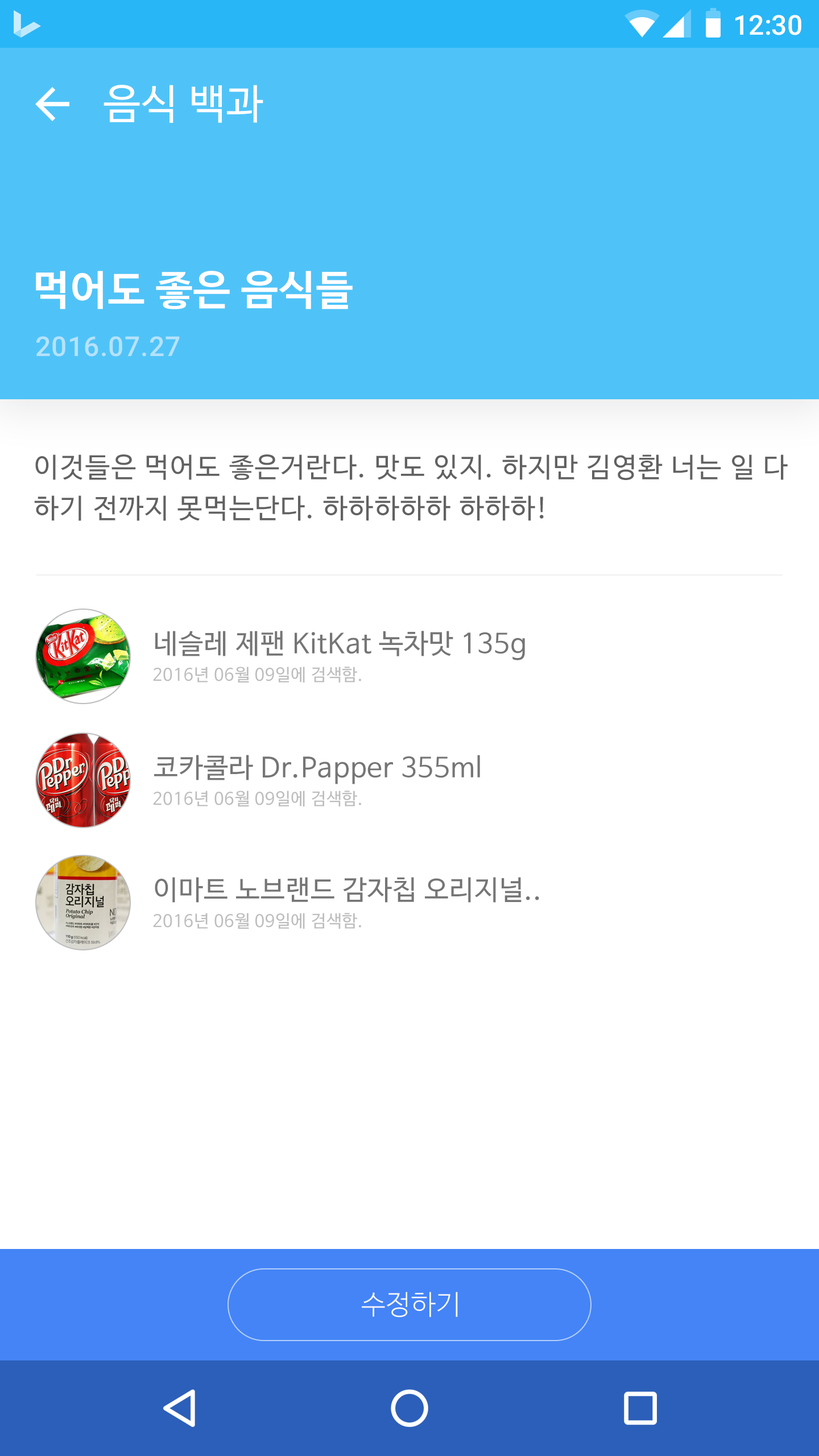
<style>
.page{position:relative;width:819px;height:1456px;background:#ffffff}
.page>*{position:absolute;margin:0}
.t1{font:27.3px "Roboto-Medium";color:#ffffff}
.t2{font:40.9px "NanumBarunGothic";letter-spacing:0.025em;color:#ffffff}
.t3{font:40.9px "NanumBarunGothicBold";letter-spacing:0.025em;color:#ffffff}
.t4{font:27.3px "Roboto-Medium";letter-spacing:0.025em;color:#b5e2fb}
.t5{font:27.3px/40.9px "NanumBarunGothic";letter-spacing:0.05em;color:#616161}
.t6{font:27.3px "NanumBarunGothic";letter-spacing:0.025em;color:#757575}
.t7{font:17.1px "NanumBarunGothic";letter-spacing:0.025em;color:#bdbdbd}
.t8{font:27.3px "NanumBarunGothicLight";letter-spacing:0.025em;color:#fafafa}
</style>
<div class="page">
<p class="t1" style="left:735px;top:15px;width:66px;height:20px">12:30</p>
<p class="t2" style="left:104px;top:85px;width:159px;height:38px">음식 백과</p>
<p class="t3" style="left:36px;top:271px;width:317px;height:38px">먹어도 좋은 음식들</p>
<p class="t4" style="left:36px;top:336px;width:144px;height:21px">2016.07.27</p>
<p class="t5" style="left:34px;top:454px;width:754px;height:67px">이것들은 먹어도 좋은거란다. 맛도 있지. 하지만 김영환 너는 일 다<br>하기 전까지 못먹는단다. 하하하하하 하하하!</p>
<p class="t6" style="left:155px;top:631px;width:370px;height:29px">네슬레 제팬 KitKat 녹차맛 135g</p>
<p class="t7" style="left:153px;top:667px;width:208px;height:15px">2016년 06월 09일에 검색함.</p>
<p class="t6" style="left:154px;top:755px;width:326px;height:29px">코카콜라 Dr.Papper 355ml</p>
<p class="t7" style="left:153px;top:791px;width:208px;height:15px">2016년 06월 09일에 검색함.</p>
<p class="t6" style="left:155px;top:877px;width:384px;height:26px">이마트 노브랜드 감자칩 오리지널..</p>
<p class="t7" style="left:153px;top:913px;width:208px;height:16px">2016년 06월 09일에 검색함.</p>
<p class="t8" style="left:362px;top:1292px;width:96px;height:25px">수정하기</p>
</div>
